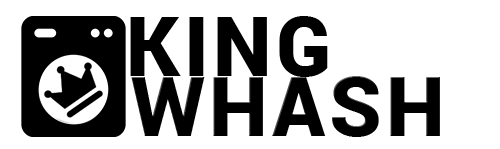
<style>
.page{position:relative;width:500px;height:149px;background:#ffffff}
.page>*{position:absolute;margin:0}
.t1{font:83.3px "Roboto-Black";letter-spacing:0.05em;color:#000000}
</style>
<div class="page">
<p class="t1" style="left:130px;top:16px;width:198px;height:61px">KING</p>
<p class="t1" style="left:131px;top:76px;width:309px;height:61px">WHASH</p>
</div>
